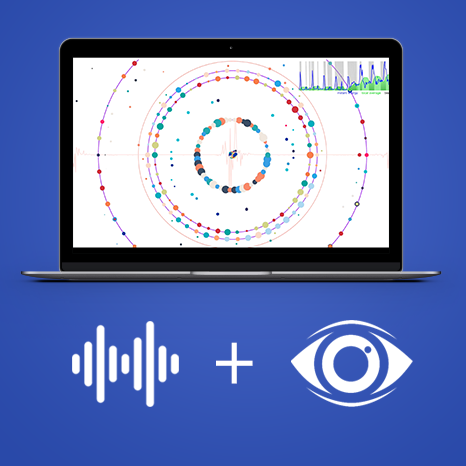
<style>
.page{position:relative;width:466px;height:466px;background:#ffffff}
.page>*{position:absolute;margin:0}
.t1{font:87.9px "Aileron-Regular";color:#ffffff}
</style>
<div class="page">
<p class="t1" style="left:216px;top:342px;width:37px;height:42px">+</p>
</div>
